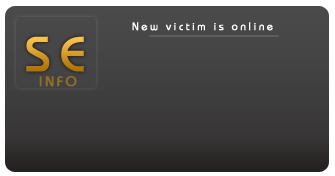
<style>
.page{position:relative;width:335px;height:176px}
.page>*{position:absolute;margin:0}
.t1{font:11px "Bauhaus";letter-spacing:0.2em;color:#ffffff;font-weight:bold}
.t2{font:48px "Bauhaus";letter-spacing:0.2em;font-weight:bold}
.t3{font:14px "Bauhaus";letter-spacing:0.2em;color:#936e26;font-weight:bold}
</style>
<div class="page">
<p class="t1" style="left:132px;top:22px;width:141px;height:9px">New victim is online</p>
<p class="t2" style="left:26px;top:36px;width:58px;height:36px">SE</p>
<p class="t3" style="left:39px;top:76px;width:38px;height:11px">INFO</p>
</div>
